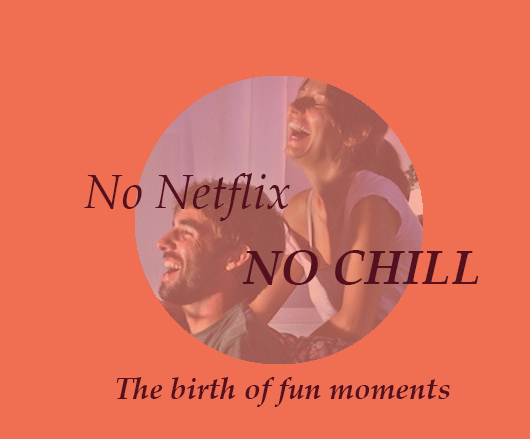
<style>
.page{position:relative;width:530px;height:439px;background:#f06f52}
.page>*{position:absolute;margin:0}
.t1{font:48px "PalatinoLinotype-Italic";color:#54101f}
.t2{font:48px "PalatinoLinotype-BoldItalic";color:#54101f}
.t3{font:30px "PalatinoLinotype-BoldItalic";color:#54101f}
</style>
<div class="page">
<p class="t1" style="left:84px;top:173px;width:206px;height:48px">No Netflix</p>
<p class="t2" style="left:242px;top:250px;width:237px;height:35px">NO CHILL</p>
<p class="t3" style="left:116px;top:377px;width:334px;height:30px">The birth of fun moments</p>
</div>
